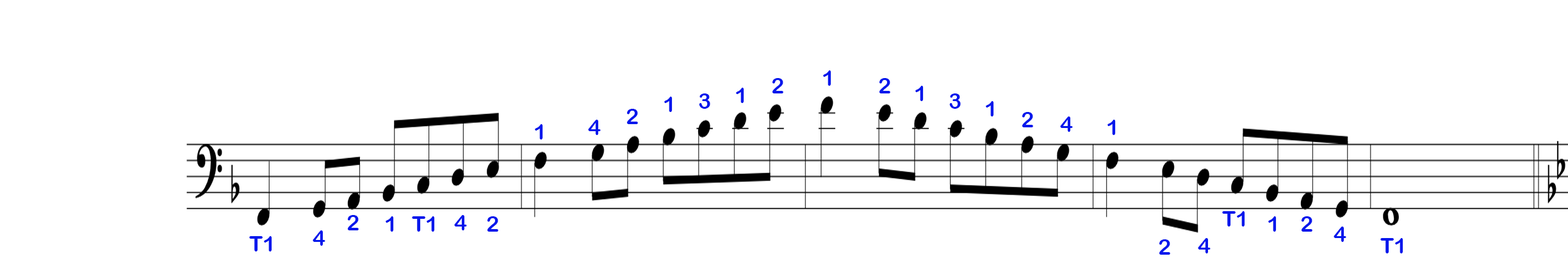
<style>
.page{position:relative;width:1568px;height:279px;background:#ffffff}
.page>*{position:absolute;margin:0}
.t1{font:21.8px "ArialRoundedMTBold";color:#0417ec}
</style>
<div class="page">
<p class="t1" style="left:823px;top:70px;width:8px;height:16px">1</p>
<p class="t1" style="left:736px;top:88px;width:8px;height:15px">1</p>
<p class="t1" style="left:772px;top:78px;width:11px;height:16px">2</p>
<p class="t1" style="left:879px;top:78px;width:11px;height:16px">2</p>
<p class="t1" style="left:915px;top:86px;width:9px;height:15px">1</p>
<p class="t1" style="left:664px;top:97px;width:9px;height:15px">1</p>
<p class="t1" style="left:699px;top:94px;width:11px;height:15px">3</p>
<p class="t1" style="left:949px;top:94px;width:12px;height:15px">3</p>
<p class="t1" style="left:986px;top:101px;width:8px;height:16px">1</p>
<p class="t1" style="left:626px;top:109px;width:12px;height:15px">2</p>
<p class="t1" style="left:1022px;top:112px;width:11px;height:15px">2</p>
<p class="t1" style="left:535px;top:124px;width:8px;height:16px">1</p>
<p class="t1" style="left:588px;top:120px;width:13px;height:15px">4</p>
<p class="t1" style="left:1060px;top:117px;width:13px;height:15px">4</p>
<p class="t1" style="left:1107px;top:120px;width:9px;height:15px">1</p>
<p class="t1" style="left:347px;top:215px;width:12px;height:16px">2</p>
<p class="t1" style="left:386px;top:216px;width:8px;height:16px">1</p>
<p class="t1" style="left:412px;top:216px;width:23px;height:16px">T1</p>
<p class="t1" style="left:454px;top:215px;width:13px;height:16px">4</p>
<p class="t1" style="left:487px;top:216px;width:11px;height:16px">2</p>
<p class="t1" style="left:1222px;top:211px;width:23px;height:16px">T1</p>
<p class="t1" style="left:1268px;top:216px;width:9px;height:16px">1</p>
<p class="t1" style="left:1301px;top:216px;width:11px;height:16px">2</p>
<p class="t1" style="left:313px;top:231px;width:12px;height:15px">4</p>
<p class="t1" style="left:1334px;top:227px;width:12px;height:15px">4</p>
<p class="t1" style="left:249px;top:236px;width:23px;height:16px">T1</p>
<p class="t1" style="left:1159px;top:240px;width:11px;height:15px">2</p>
<p class="t1" style="left:1198px;top:238px;width:13px;height:16px">4</p>
<p class="t1" style="left:1380px;top:238px;width:23px;height:16px">T1</p>
</div>
